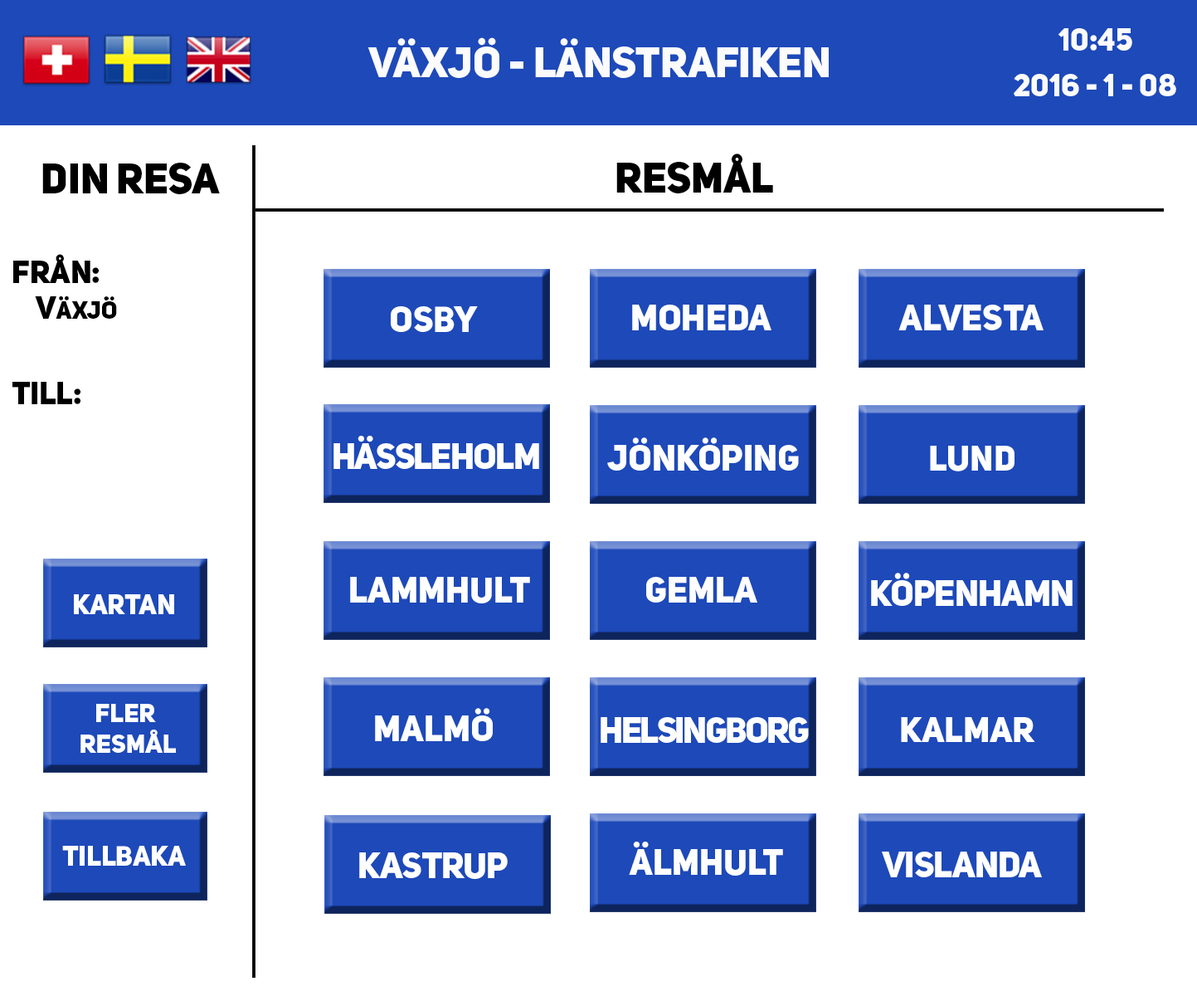
<style>
.page{position:relative;width:1197px;height:996px;background:#ffffff}
.page>*{position:absolute;margin:0}
.t1{font:31.5px "UniSansHeavyCAPS";color:#fbfbfb}
.t2{font:42.3px "UniSansHeavyCAPS";color:#fbfbfb}
.t3{font:42.3px "UniSansHeavyCAPS";color:#000000}
.t4{font:31.5px "UniSansHeavyCAPS";color:#000000}
.t5{font:24.1px "UniSansHeavyCAPS";color:#000000}
.t6{font:35.6px "UniSansHeavyCAPS";color:#fefefe}
.t7{font:35.6px "UniSansHeavyCAPS";letter-spacing:-0.04em;color:#fefefe}
.t8{font:34.9px "UniSansHeavyCAPS";color:#fefefe}
.t9{font:35.6px "UniSansHeavyCAPS";letter-spacing:-0.02em;color:#fefefe}
.t10{font:27.4px "UniSansHeavyCAPS";color:#fefefe}
.t11{font:25.8px "UniSansHeavyCAPS";color:#fefefe}
.t12{font:35.6px "UniSansHeavyCAPS";letter-spacing:-0.06em;color:#fefefe}
</style>
<div class="page">
<p class="t1" style="left:1058px;top:28px;width:75px;height:23px">10:45</p>
<p class="t2" style="left:368px;top:37px;width:461px;height:41px">växjö - länstrafiken</p>
<p class="t1" style="left:1014px;top:74px;width:163px;height:22px">2016 - 1 - 08</p>
<p class="t3" style="left:617px;top:154px;width:156px;height:39px">RESMÅL</p>
<p class="t3" style="left:42px;top:163px;width:178px;height:31px">DIN RESA</p>
<p class="t4" style="left:13px;top:254px;width:86px;height:29px">FRÅN:</p>
<p class="t5" style="left:35px;top:296px;width:82px;height:23px"><span class="t4">V</span>ÄXJÖ</p>
<p class="t6" style="left:632px;top:305px;width:140px;height:25px">Moheda</p>
<p class="t6" style="left:899px;top:305px;width:145px;height:25px">ALVESTA</p>
<p class="t6" style="left:391px;top:306px;width:87px;height:26px">OSBy</p>
<p class="t4" style="left:12px;top:382px;width:68px;height:22px">TILL:</p>
<p class="t7" style="left:334px;top:436px;width:205px;height:33px">hässleholm</p>
<p class="t6" style="left:607px;top:437px;width:192px;height:34px">Jönköping</p>
<p class="t8" style="left:930px;top:446px;width:85px;height:25px">Lund</p>
<p class="t6" style="left:350px;top:577px;width:180px;height:26px">Lammhult</p>
<p class="t6" style="left:646px;top:577px;width:112px;height:25px">Gemla</p>
<p class="t9" style="left:871px;top:573px;width:202px;height:33px">köpenhamn</p>
<p class="t10" style="left:74px;top:594px;width:100px;height:20px">KARTAN</p>
<p class="t11" style="left:80px;top:704px;width:96px;height:49px;text-align:center">FLER<br> RESMÅL</p>
<p class="t6" style="left:375px;top:708px;width:118px;height:33px">MALMÖ</p>
<p class="t12" style="left:601px;top:717px;width:208px;height:26px">Helsingborg</p>
<p class="t8" style="left:901px;top:717px;width:135px;height:25px">kalmar</p>
<p class="t10" style="left:62px;top:846px;width:124px;height:20px">TILLBAKA</p>
<p class="t6" style="left:629px;top:841px;width:154px;height:34px">älmhult</p>
<p class="t9" style="left:359px;top:852px;width:149px;height:27px">KASTRUP</p>
<p class="t9" style="left:882px;top:851px;width:160px;height:26px">Vislanda</p>
</div>
